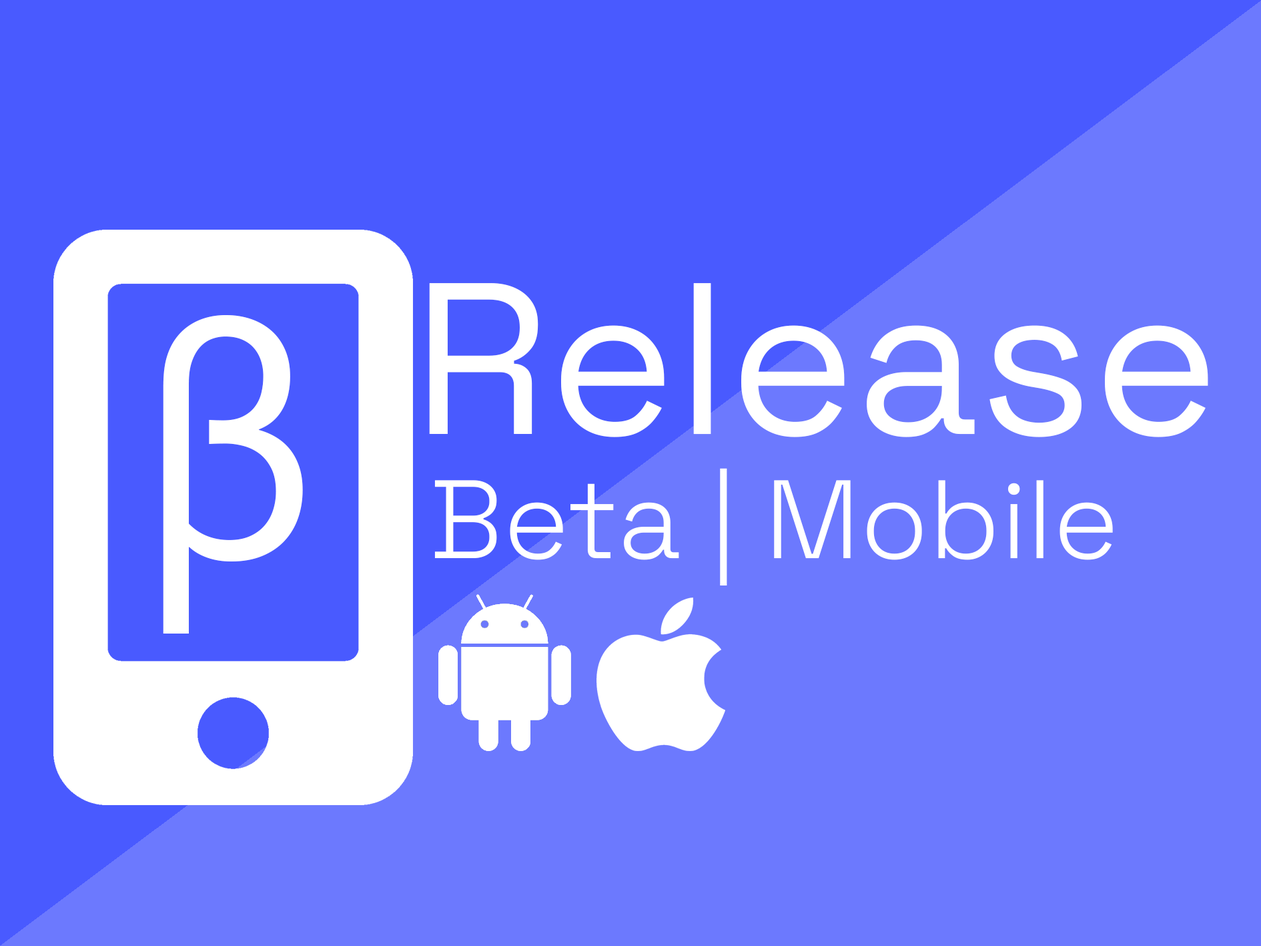
<style>
.page{position:relative;width:1261px;height:946px;background:#6c79fe}
.page>*{position:absolute;margin:0}
.t1{font:215.3px "SpaceGrotesk-Regular";color:#ffffff}
.t2{font:336.1px "Corbel";color:#ffffff}
.t3{font:111.1px "SpaceGrotesk-Light";color:#ffffff}
</style>
<div class="page">
<p class="t1" style="left:429px;top:283px;width:779px;height:154px">Release</p>
<p class="t2" style="left:163px;top:315px;width:140px;height:318px">β</p>
<p class="t3" style="left:434px;top:468px;width:679px;height:117px">Beta | Mobile</p>
</div>
